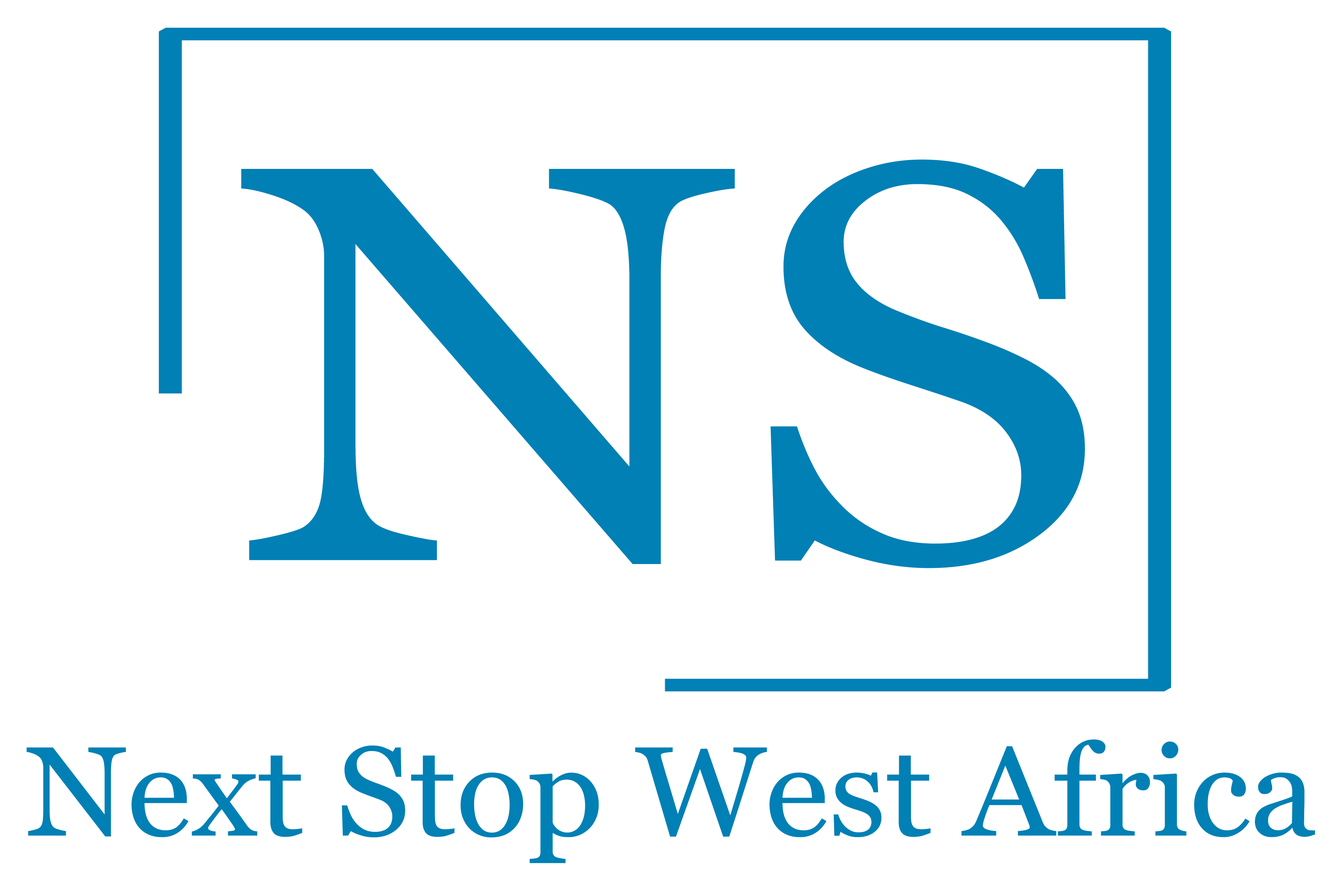
<style>
.page{position:relative;width:1343px;height:888px;background:#ffffff}
.page>*{position:absolute;margin:0}
.t1{font:564.7px "Georgia";color:#0180b5;scale:1.17 1}
.t2{font:126.9px "Georgia";color:#0180b5;scale:1.05 1}
</style>
<div class="page">
<p class="t1" style="left:241px;top:159px;width:844px;height:409px">NS</p>
<p class="t2" style="left:27px;top:739px;width:1288px;height:124px">Next Stop West Africa</p>
</div>
